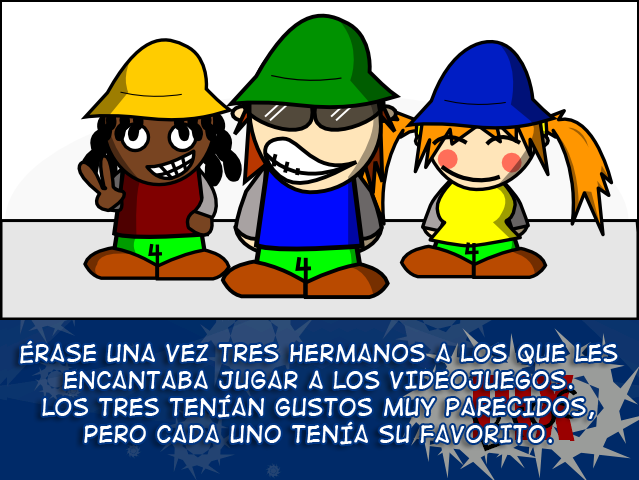
<style>
.page{position:relative;width:639px;height:480px;background:#ffffff}
.page>*{position:absolute;margin:0}
.t1{font:22.4px "DigitalStrip2";color:#ffffff}
</style>
<div class="page">
<p class="t1" style="left:20px;top:340px;width:598px;height:105px;text-align:center">érase una vez tres hermanos a los que les encantaba jugar a los videojuegos. <br>los tres tenían gustos muy parecidos, <br>pero cada uno tenía su favorito.</p>
</div>
